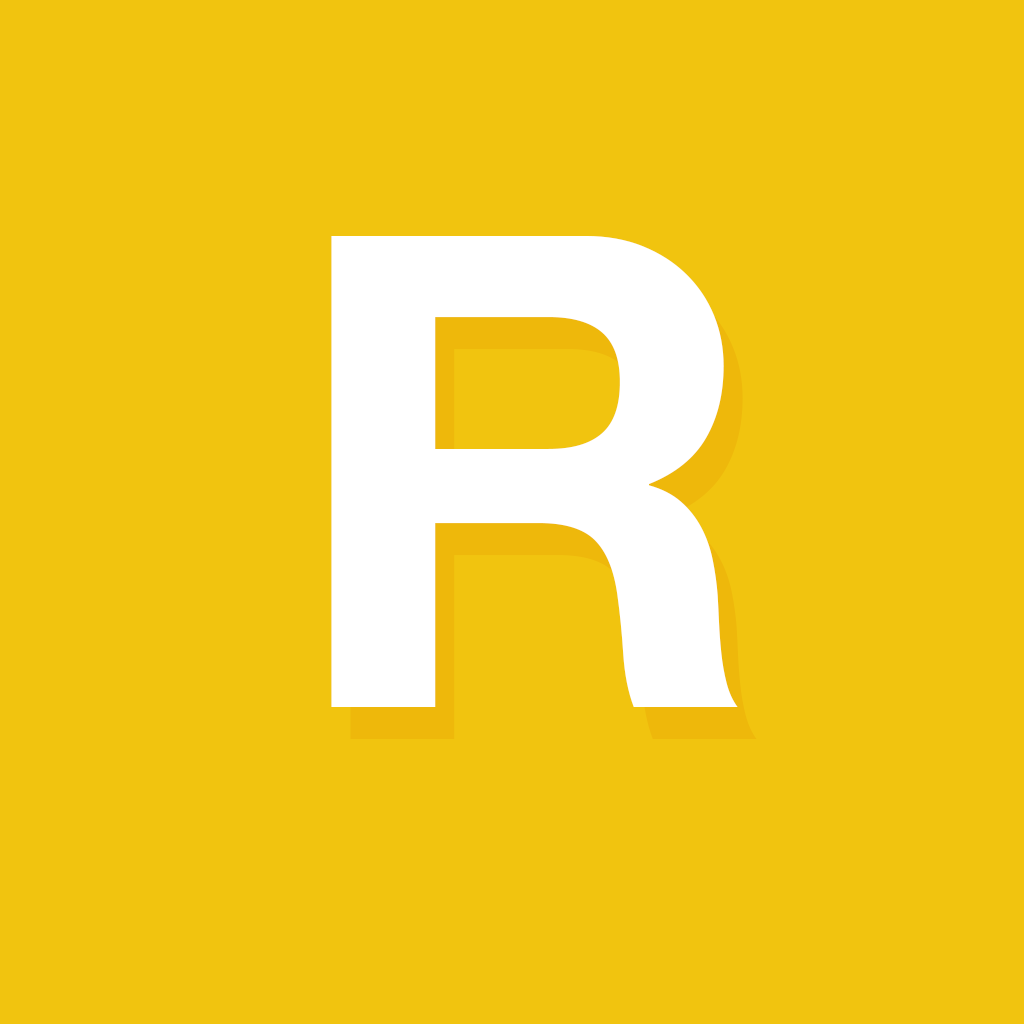
<style>
.page{position:relative;width:1024px;height:1024px;background:#f1c40f}
.page>*{position:absolute;margin:0}
.t1{font:660px "HelveticaNeue-Bold";letter-spacing:-0.075em;color:#ffffff}
</style>
<div class="page">
<p class="t1" style="left:331px;top:236px;width:407px;height:471px">R</p>
</div>
